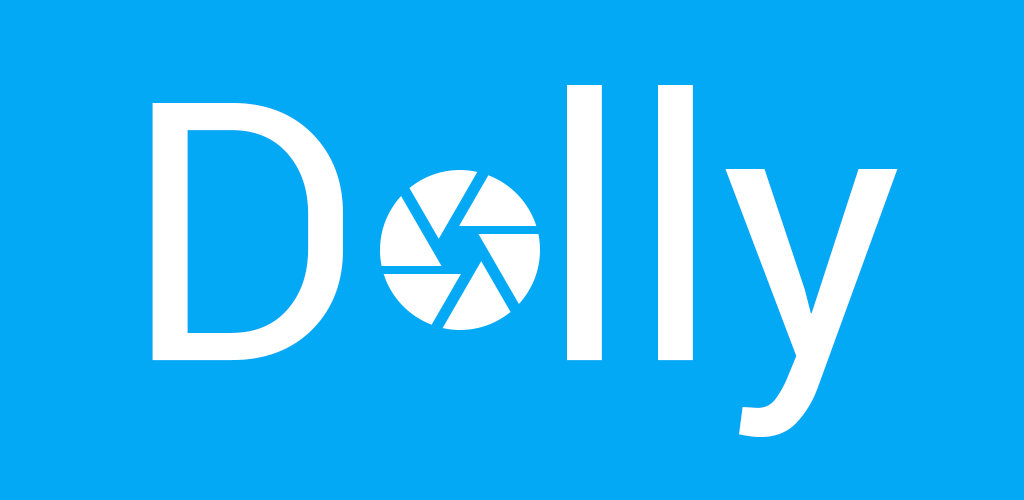
<style>
.page{position:relative;width:1024px;height:500px;background:#03a9f4}
.page>*{position:absolute;margin:0}
.t1{font:361.3px "Roboto-Regular";color:#ffffff}
</style>
<div class="page">
<p class="t1" style="left:152px;top:85px;width:746px;height:352px">D  lly</p>
</div>
